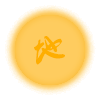
<style>
.page{position:relative;width:100px;height:100px;background:#ffffff}
.page>*{position:absolute;margin:0}
.t1{font:32px "2.0-";color:#feae01}
</style>
<div class="page">
<p class="t1" style="left:34px;top:36px;width:31px;height:29px">地</p>
</div>
